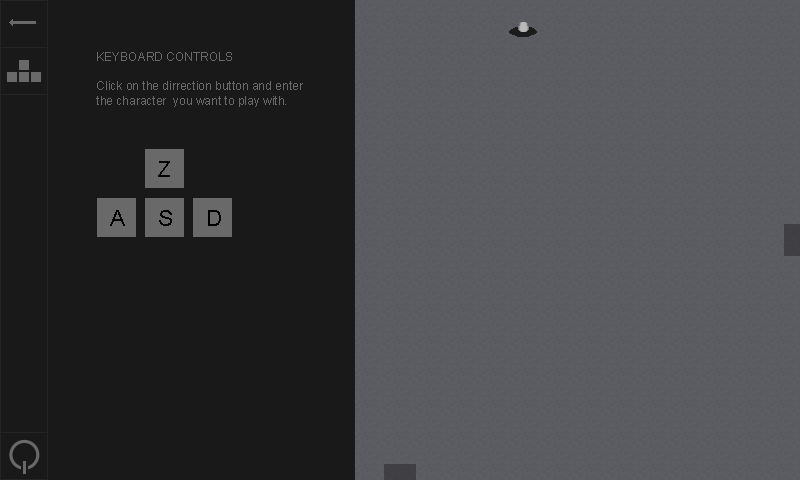
<style>
.page{position:relative;width:800px;height:480px;background:#191919}
.page>*{position:absolute;margin:0}
.t1{font:12px "ArialMT";color:#696969}
.t2{font:22px "ArialMT";color:#000000}
</style>
<div class="page">
<p class="t1" style="left:96px;top:52px;width:207px;height:55px">KEYBOARD CONTROLS<br><br>Click on the dirrection button and enter<br>the character  you want to play with.</p>
<p class="t2" style="left:158px;top:161px;width:12px;height:16px">Z</p>
<p class="t2" style="left:110px;top:210px;width:15px;height:16px">A</p>
<p class="t2" style="left:159px;top:210px;width:13px;height:16px">S</p>
<p class="t2" style="left:208px;top:210px;width:13px;height:16px">D</p>
</div>
